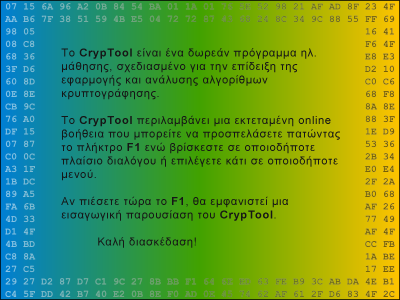
<style>
.page{position:relative;width:400px;height:300px}
.page>*{position:absolute;margin:0}
.t1{font:11.2px "ArialMT";letter-spacing:0.05em;color:#161616}
.t2{font:11.2px "Arial-BoldMT";letter-spacing:0.05em;color:#161616}
</style>
<div class="page">
<p class="t1" style="left:61px;top:48px;width:279px;height:200px">Το <span class="t2">CrypTool</span> είναι ένα δωρεάν πρόγραμμα ηλ.<br>μάθησης, σχεδιασμένο για την επίδειξη της<br>εφαρμογής και ανάλυσης αλγορίθμων<br>κρυπτογράφησης.<br><br>Το <span class="t2">CrypTool</span> περιλαμβάνει μια εκτεταμένη online<br>βοήθεια που μπορείτε να προσπελάσετε πατώντας<br>το πλήκτρο <span class="t2">F1</span> ενώ βρίσκεστε σε οποιοδήποτε<br>πλαίσιο διαλόγου ή επιλέγετε κάτι σε οποιοδήποτε<br>μενού.<br><br>Αν πιέσετε τώρα το <span class="t2">F1</span>, θα εμφανιστεί μια<br>εισαγωγική παρουσίαση του <span class="t2">CrypTool</span>.<br><br> Καλή διασκέδαση!</p>
</div>
